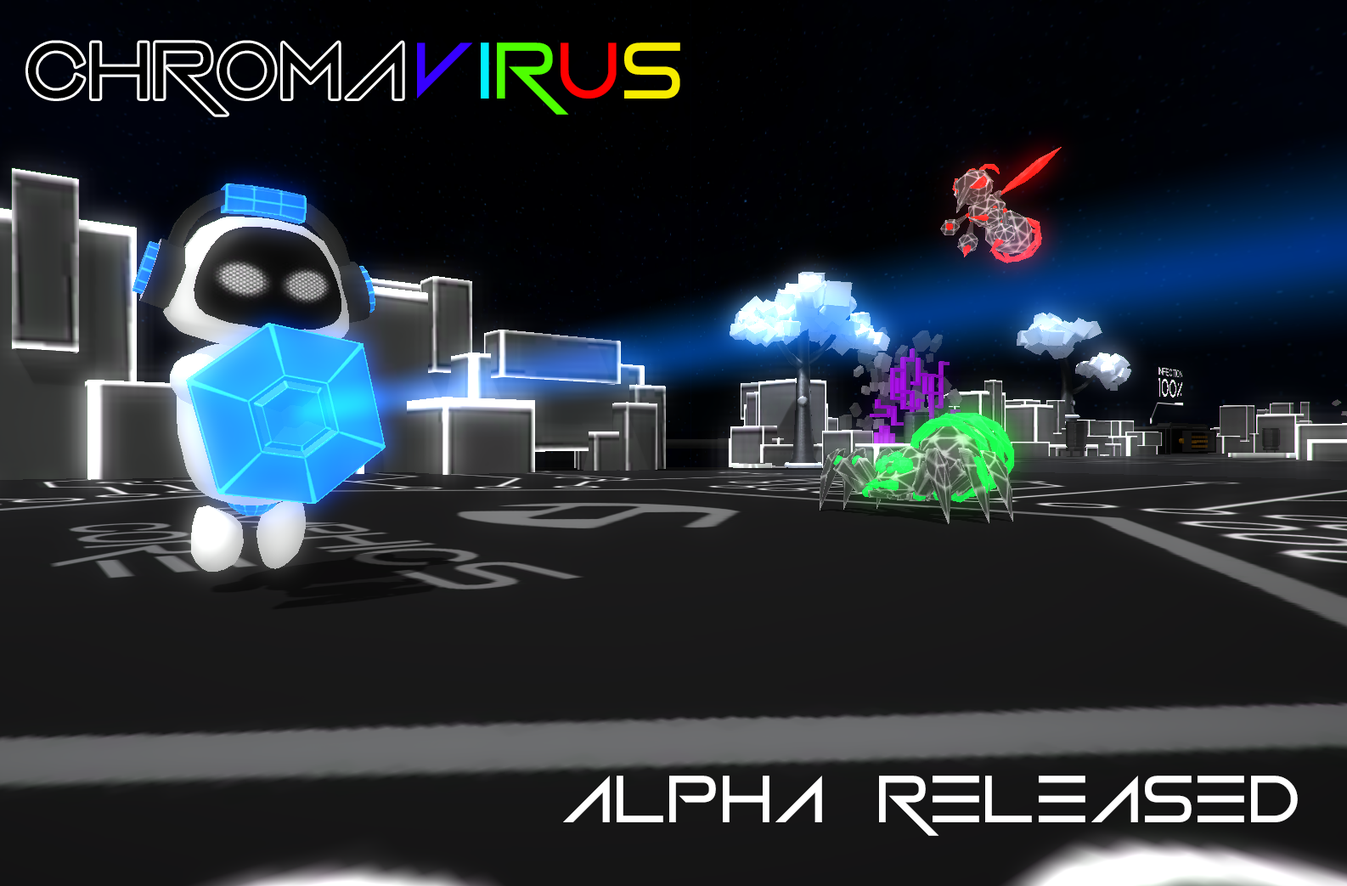
<style>
.page{position:relative;width:1347px;height:886px}
.page>*{position:absolute;margin:0}
.t1{font:81.5px "VerminVibes2";color:#3600ff}
.t2{font:81.5px "VerminVibes2";color:#00f0ff}
.t3{font:81.5px "VerminVibes2";color:#4eff00}
.t4{font:81.5px "VerminVibes2";color:#ff0000}
.t5{font:81.5px "VerminVibes2";color:#f7ec00}
.t6{font:67.9px "VerminVibes2";color:#ffffff}
</style>
<div class="page">
<p class="t1" style="left:417px;top:42px;width:263px;height:73px">v<span class="t2">I</span><span class="t3">R</span><span class="t4">U</span><span class="t5">S</span></p>
<p class="t6" style="left:563px;top:775px;width:734px;height:60px">ALPHA   RELEASED</p>
</div>
